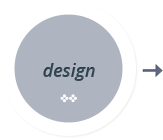
<style>
.page{position:relative;width:163px;height:140px;background:#ffffff}
.page>*{position:absolute;margin:0}
.t1{font:18px "OpenSans-SemiboldItalic";color:#31464e}
</style>
<div class="page">
<p class="t1" style="left:43px;top:63px;width:52px;height:18px">design</p>
</div>
